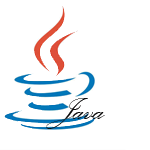
<style>
.page{position:relative;width:150px;height:150px;background:#ffffff}
.page>*{position:absolute;margin:0}
.t1{font:40px "PalaceScriptMT";color:#0c0b0b}
</style>
<div class="page">
<p class="t1" style="left:46px;top:98px;width:59px;height:31px">Java</p>
</div>
